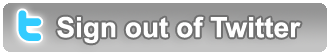
<style>
.page{position:relative;width:330px;height:56px;background:#ffffff}
.page>*{position:absolute;margin:0}
.t1{font:28px "Arial-BoldMT";color:#ffffff}
</style>
<div class="page">
<p class="t1" style="left:57px;top:16px;width:244px;height:28px">Sign out of Twitter</p>
</div>
